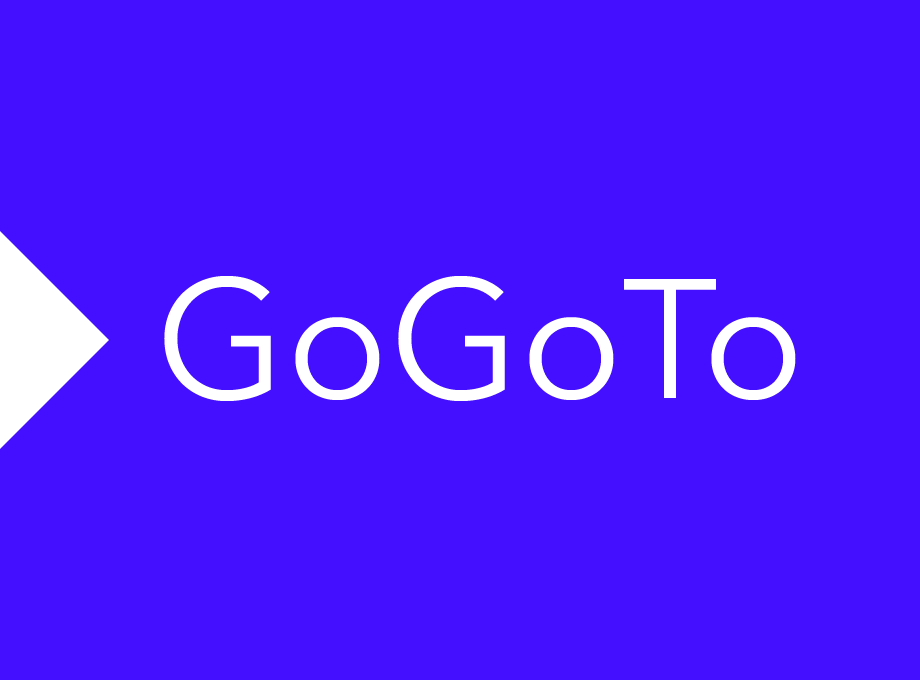
<style>
.page{position:relative;width:920px;height:680px;background:#440eff}
.page>*{position:absolute;margin:0}
.t1{font:168px "AvenirNext-Regular";color:#ffffff}
</style>
<div class="page">
<p class="t1" style="left:164px;top:276px;width:632px;height:125px">GoGoTo</p>
</div>
